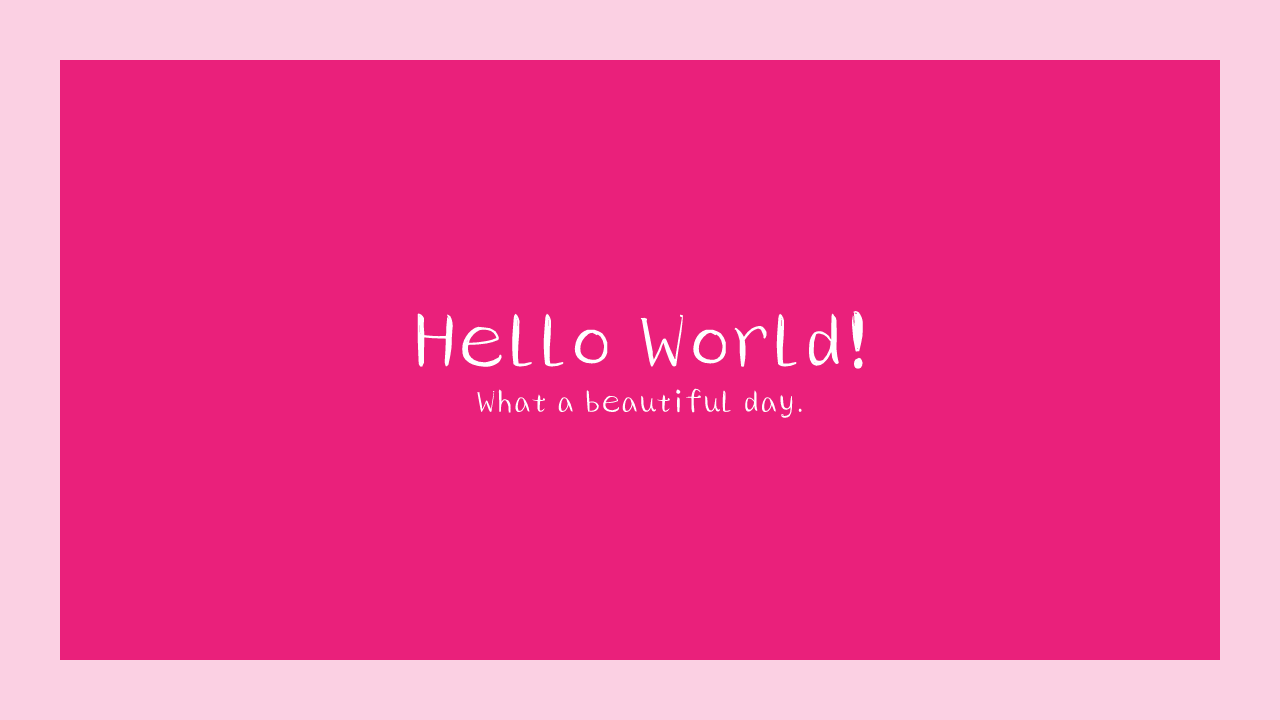
<style>
.page{position:relative;width:1280px;height:720px;background:#ea207b}
.page>*{position:absolute;margin:0}
.t1{font:79px "HYXiaoMaiTiJ";color:#ffffff}
.t2{font:32px "HYXiaoMaiTiJ";color:#ffffff}
</style>
<div class="page">
<p class="t1" style="left:417px;top:311px;width:447px;height:59px">Hello World!</p>
<p class="t2" style="left:476px;top:388px;width:326px;height:31px">What a beautiful day.</p>
</div>
